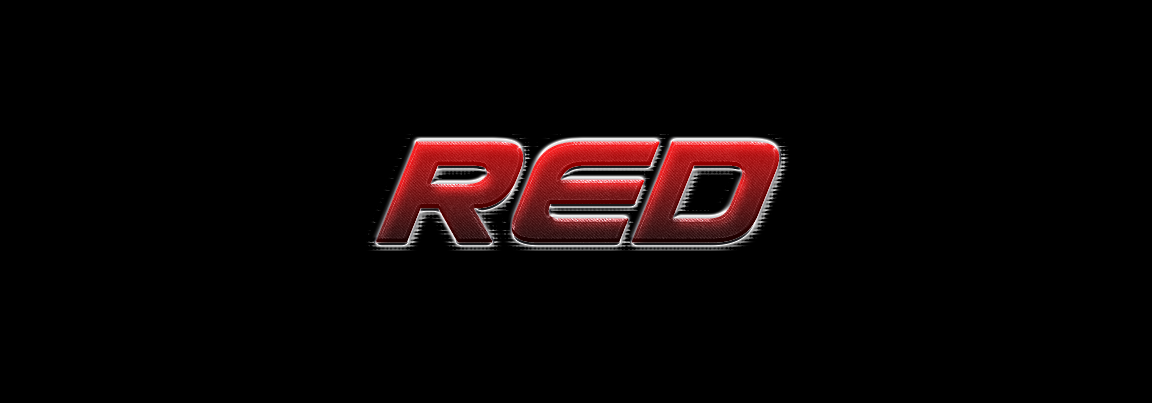
<style>
.page{position:relative;width:1152px;height:403px;background:#000000}
.page>*{position:absolute;margin:0}
.t1{font:172px "UsuziItalic";letter-spacing:-0.025em;font-weight:bold}
</style>
<div class="page">
<p class="t1" style="left:375px;top:141px;width:405px;height:102px">red</p>
<p class="t1" style="left:375px;top:141px;width:405px;height:102px">red</p>
<p class="t1" style="left:375px;top:141px;width:405px;height:102px">red</p>
</div>
